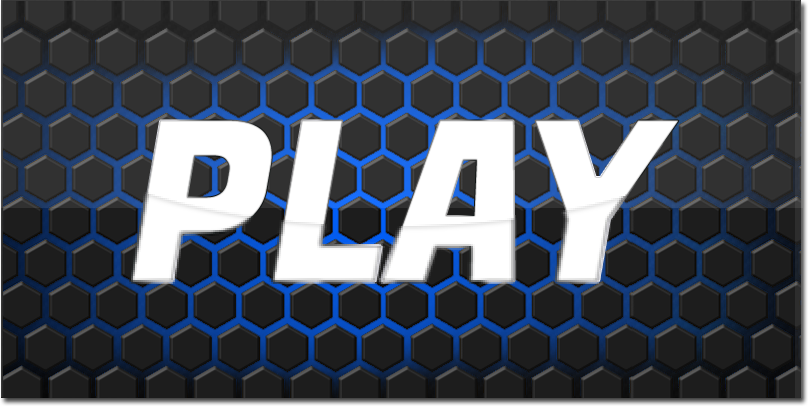
<style>
.page{position:relative;width:808px;height:406px;background:#313131}
.page>*{position:absolute;margin:0}
.t1{font:222.7px "FugazOne-Regular";color:#ffffff}
</style>
<div class="page">
<p class="t1" style="left:132px;top:120px;width:547px;height:162px">PLAY</p>
</div>
